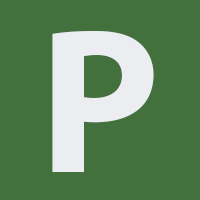
<style>
.page{position:relative;width:200px;height:200px;background:#42713e}
.page>*{position:absolute;margin:0}
.t1{font:208.3px "MyriadPro-Bold";color:#ecedf1}
</style>
<div class="page">
<p class="t1" style="left:52px;top:30px;width:102px;height:142px">P</p>
</div>
